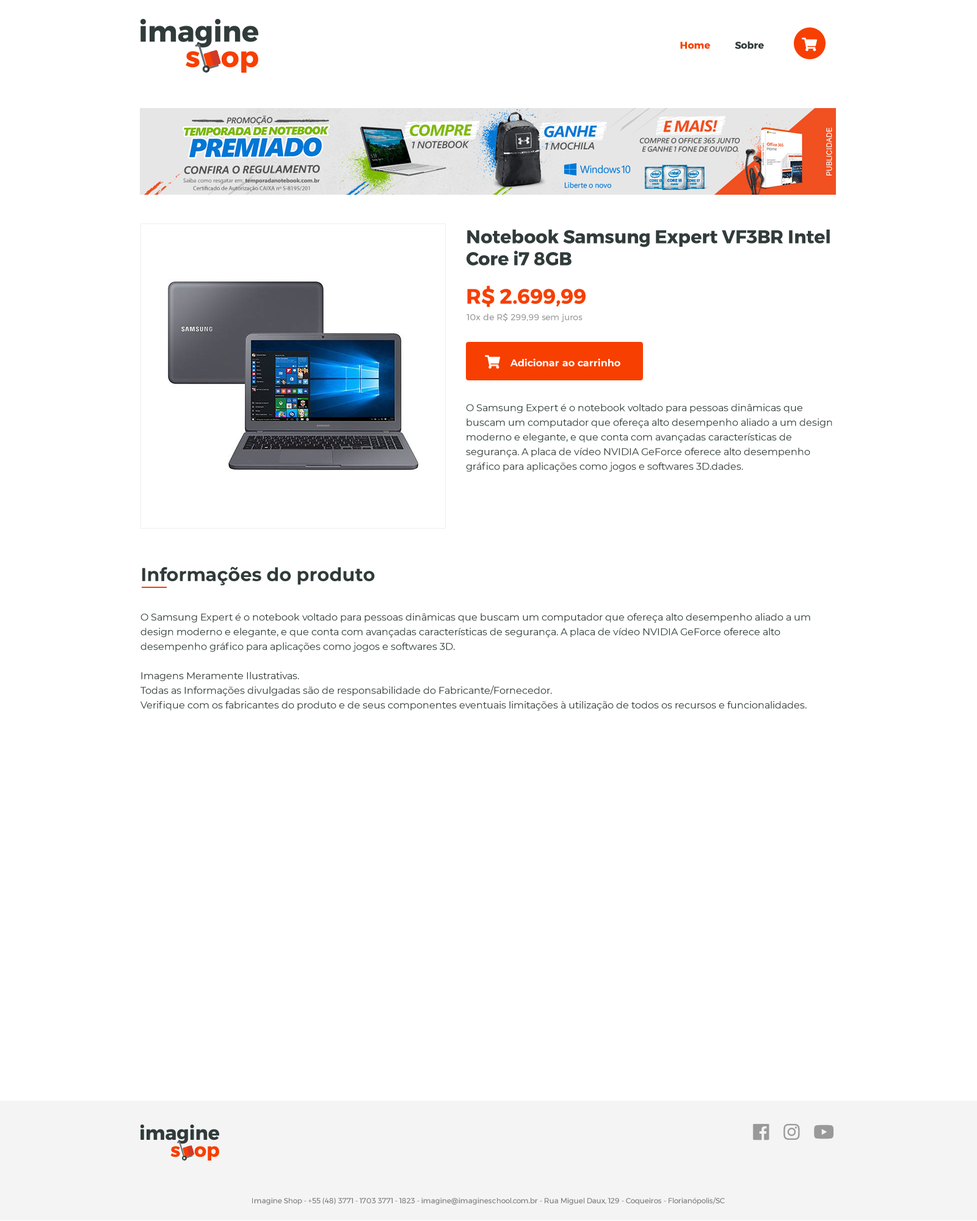
<style>
.page{position:relative;width:977px;height:1221px;background:#ffffff}
.page>*{position:absolute;margin:0}
.t1{font:9.8px "Montserrat-Bold";color:#f73f01}
.t2{font:9.8px "Montserrat-Bold";color:#303b3a}
.t3{font:18.3px "Montserrat-Bold";color:#303b3a}
.t4{font:20.8px "Montserrat-Bold";color:#f73f01}
.t5{font:8.5px "Montserrat-Regular";color:#999999}
.t6{font:9.8px "Montserrat-Bold";color:#ffffff}
.t7{font:9.8px/14.7px "Montserrat-Regular";color:#303b3a}
.t8{font:7.3px "Montserrat-Regular";color:#777777}
</style>
<div class="page">
<p class="t1" style="left:680px;top:42px;width:30px;height:7px">Home</p>
<p class="t2" style="left:734px;top:42px;width:30px;height:7px">Sobre</p>
<p class="t3" style="left:466px;top:230px;width:364px;height:36px">Notebook Samsung Expert VF3BR Intel <br>Core i7 8GB</p>
<p class="t4" style="left:467px;top:286px;width:118px;height:21px">R$ 2.699,99</p>
<p class="t5" style="left:466px;top:313px;width:116px;height:9px">10x de R$ 299,99 sem juros</p>
<p class="t6" style="left:510px;top:358px;width:110px;height:9px">Adicionar ao carrinho</p>
<p class="t7" style="left:466px;top:403px;width:366px;height:69px">O Samsung Expert é o notebook voltado para pessoas dinâmicas que buscam um computador que ofereça alto desempenho aliado a um design moderno e elegante, e que conta com avançadas características de segurança. A placa de vídeo NVIDIA GeForce oferece alto desempenho gráfico para aplicações como jogos e softwares 3D.dades.</p>
<p class="t3" style="left:142px;top:566px;width:233px;height:19px">Informações do produto</p>
<p class="t7" style="left:140px;top:613px;width:670px;height:98px">O Samsung Expert é o notebook voltado para pessoas dinâmicas que buscam um computador que ofereça alto desempenho aliado a um design moderno e elegante, e que conta com avançadas características de segurança. A placa de vídeo NVIDIA GeForce oferece alto desempenho gráfico para aplicações como jogos e softwares 3D.<br><br>Imagens Meramente Ilustrativas.<br>Todas as Informações divulgadas são de responsabilidade do Fabricante/Fornecedor.<br>Verifique com os fabricantes do produto e de seus componentes eventuais limitações à utilização de todos os recursos e funcionalidades.</p>
<p class="t8" style="left:252px;top:1197px;width:473px;height:8px">Imagine Shop - +55 (48) 3771 - 1703 3771 - 1823 - imagine@imagineschool.com.br - Rua Miguel Daux, 129 - Coqueiros - Florianópolis/SC</p>
</div>
